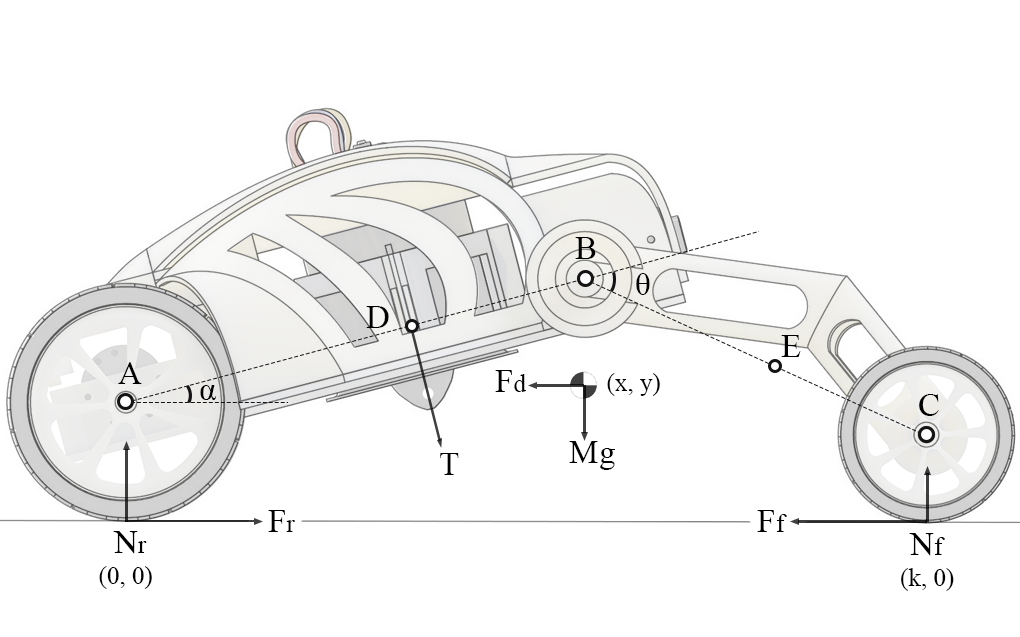
<style>
.page{position:relative;width:1020px;height:637px;background:#ffffff}
.page>*{position:absolute;margin:0}
.t1{font:33.3px "TimesNewRomanPSMT";color:#000000}
.t2{font:25px "TimesNewRomanPSMT";color:#000000}
</style>
<div class="page">
<p class="t1" style="left:575px;top:237px;width:21px;height:22px">B</p>
<p class="t1" style="left:636px;top:273px;width:14px;height:22px">θ</p>
<p class="t1" style="left:366px;top:306px;width:23px;height:22px">D</p>
<p class="t1" style="left:781px;top:335px;width:20px;height:22px">E</p>
<p class="t1" style="left:118px;top:362px;width:24px;height:22px">A</p>
<p class="t1" style="left:495px;top:370px;width:31px;height:22px">F<span class="t2">d</span></p>
<p class="t2" style="left:607px;top:373px;width:53px;height:23px">(x, y)</p>
<p class="t1" style="left:200px;top:385px;width:17px;height:15px">α</p>
<p class="t1" style="left:919px;top:394px;width:20px;height:22px">C</p>
<p class="t1" style="left:569px;top:441px;width:46px;height:29px">Mg</p>
<p class="t1" style="left:440px;top:453px;width:19px;height:22px">T</p>
<p class="t1" style="left:268px;top:510px;width:27px;height:22px">F<span class="t2">r</span></p>
<p class="t1" style="left:757px;top:510px;width:30px;height:22px">F<span class="t2">f</span></p>
<p class="t1" style="left:113px;top:531px;width:34px;height:23px">N<span class="t2">r</span></p>
<p class="t1" style="left:909px;top:533px;width:36px;height:23px">N<span class="t2">f</span></p>
<p class="t2" style="left:99px;top:566px;width:53px;height:23px">(0, 0)</p>
<p class="t2" style="left:901px;top:568px;width:53px;height:23px">(k, 0)</p>
</div>
